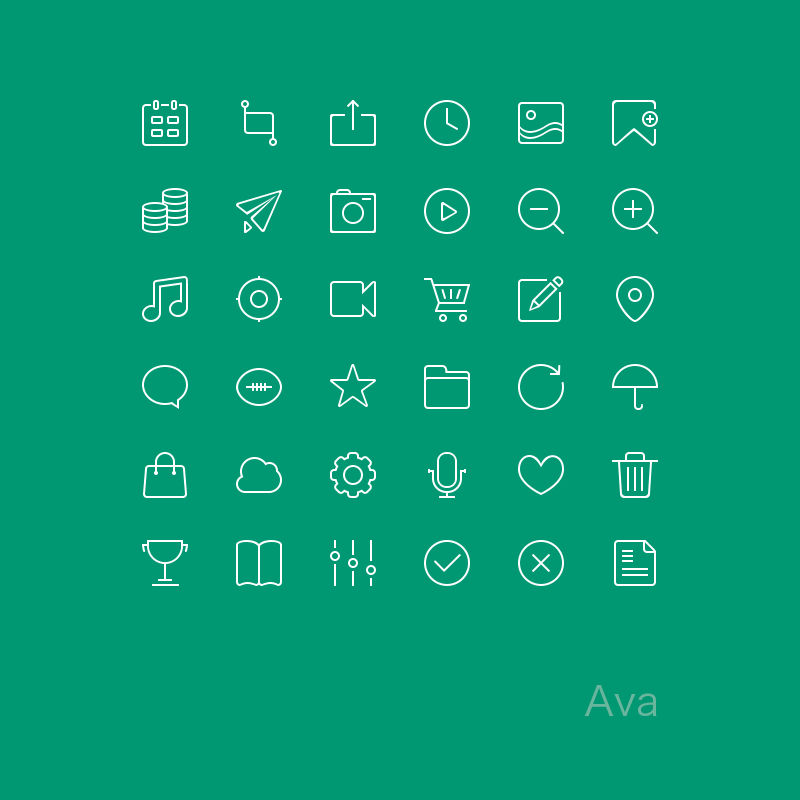
<style>
.page{position:relative;width:800px;height:800px;background:#009872}
.page>*{position:absolute;margin:0}
.t1{font:40px "HiraginoSansGB-W3";color:#69b69e}
</style>
<div class="page">
<p class="t1" style="left:584px;top:685px;width:73px;height:31px">Ava</p>
</div>
